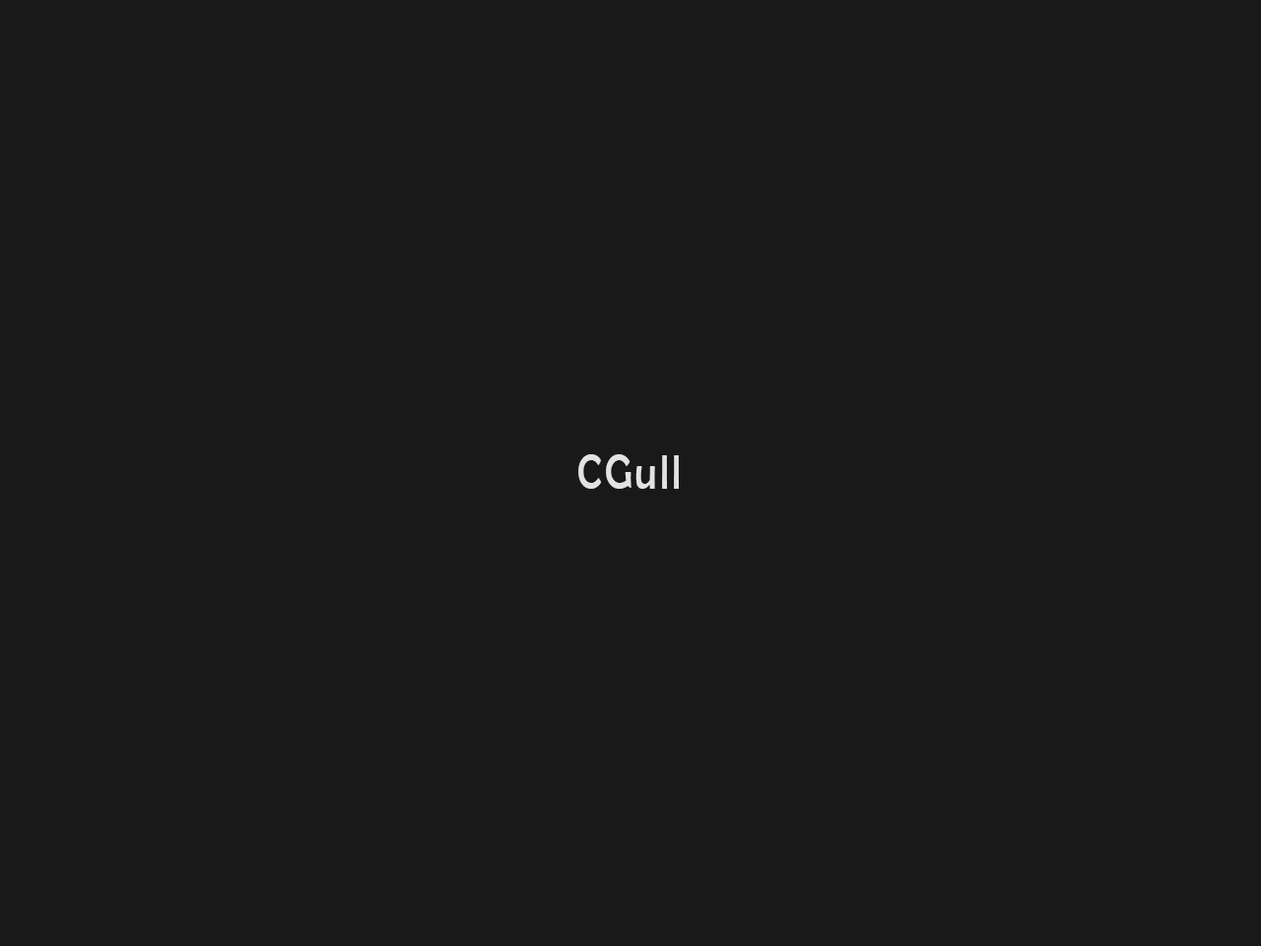
<style>
.page{position:relative;width:1261px;height:946px;background:#191919}
.page>*{position:absolute;margin:0}
.t1{font:48.2px "BerlinSansFB-Reg";letter-spacing:0.07em;color:#e2e2e2;scale:0.84 1}
</style>
<div class="page">
<p class="t1" style="left:578px;top:454px;width:101px;height:35px">CGull</p>
</div>
